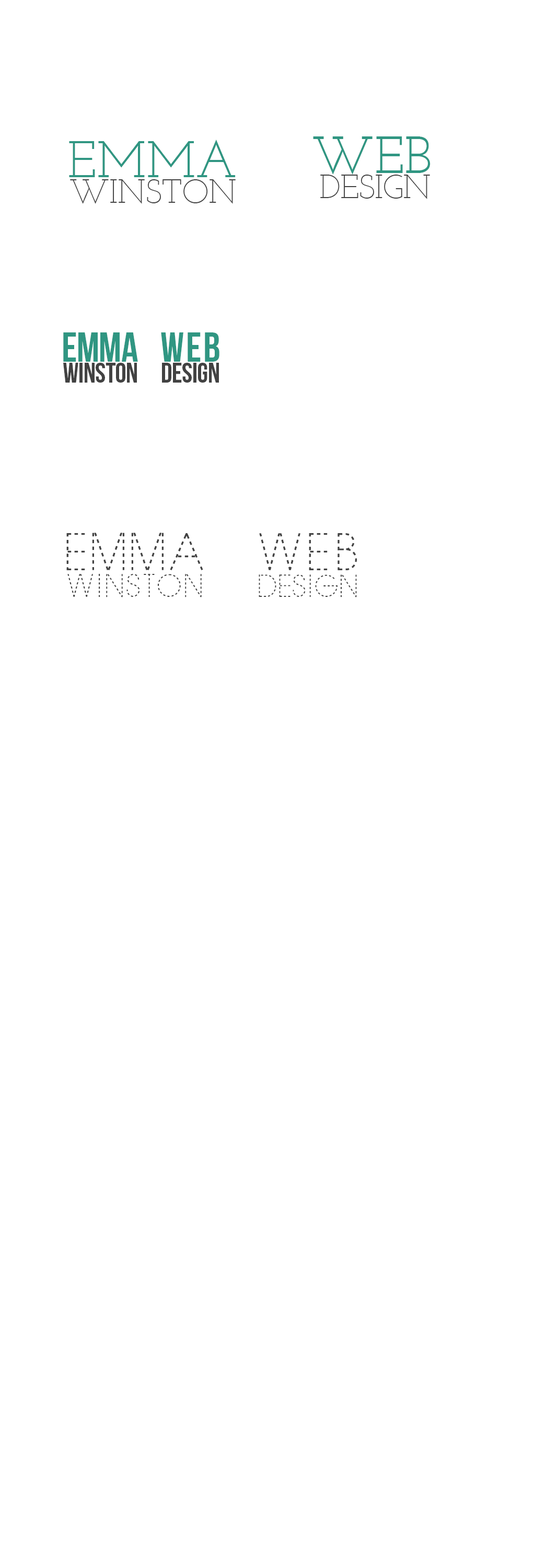
<style>
.page{position:relative;width:535px;height:1568px;background:#ffffff}
.page>*{position:absolute;margin:0}
.t1{font:52.3px "JosefinSlab";letter-spacing:0.005em;color:#309682}
.t2{font:51.2px "JosefinSlab";color:#309682}
.t3{font:33.5px "JosefinSlab-Light";letter-spacing:-0.005em;color:#424242}
.t4{font:33.5px "JosefinSlab-Light";letter-spacing:-0.01em;color:#424242}
.t5{font:41.8px "BebasNeue";letter-spacing:-0.01em;color:#309682}
.t6{font:41.8px "BebasNeue";letter-spacing:0.05em;color:#309682}
.t7{font:28.2px "BebasNeue";letter-spacing:-0.01em;color:#424242}
.t8{font:28.2px "BebasNeue";letter-spacing:-0.012em;color:#424242}
.t9{font:52.3px "DashedLines";letter-spacing:-0.01em;color:#424242}
.t10{font:52.3px "DashedLines";letter-spacing:0.04em;color:#424242}
.t11{font:32.4px "DashedLines";letter-spacing:-0.01em;color:#424242}
.t12{font:31.4px "DashedLines";letter-spacing:-0.05em;color:#424242}
</style>
<div class="page">
<p class="t1" style="left:313px;top:136px;width:118px;height:39px">WEB</p>
<p class="t2" style="left:69px;top:140px;width:167px;height:37px">EMMA</p>
<p class="t3" style="left:70px;top:179px;width:166px;height:25px">WINSTON</p>
<p class="t4" style="left:320px;top:175px;width:110px;height:24px">DESIGN</p>
<p class="t5" style="left:63px;top:332px;width:75px;height:30px">emma</p>
<p class="t6" style="left:161px;top:332px;width:59px;height:30px">web</p>
<p class="t7" style="left:63px;top:363px;width:74px;height:20px">winston</p>
<p class="t8" style="left:162px;top:363px;width:57px;height:20px">design</p>
<p class="t9" style="left:66px;top:533px;width:137px;height:37px">EMMA</p>
<p class="t10" style="left:259px;top:533px;width:98px;height:37px">WEB</p>
<p class="t11" style="left:67px;top:574px;width:135px;height:23px">WINSTON</p>
<p class="t12" style="left:259px;top:574px;width:98px;height:23px">DESIGN</p>
</div>
